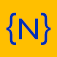
<style>
.page{position:relative;width:57px;height:57px;background:#ffbf00}
.page>*{position:absolute;margin:0}
.t1{font:34.4px "GillSans";color:#0030b2}
.t2{font:30.2px "GillSans";color:#0030b2}
</style>
<div class="page">
<p class="t1" style="left:6px;top:12px;width:45px;height:33px">{<span class="t2">N</span>}</p>
</div>
